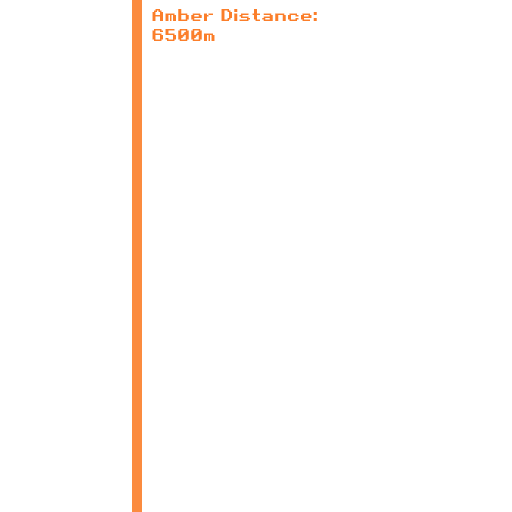
<style>
.page{position:relative;width:512px;height:512px;background:#ffffff}
.page>*{position:absolute;margin:0}
.t1{font:16.7px "RetroGaming";color:#fb7e2a}
</style>
<div class="page">
<p class="t1" style="left:152px;top:9px;width:165px;height:32px">Amber Distance:<br>6500m</p>
</div>
